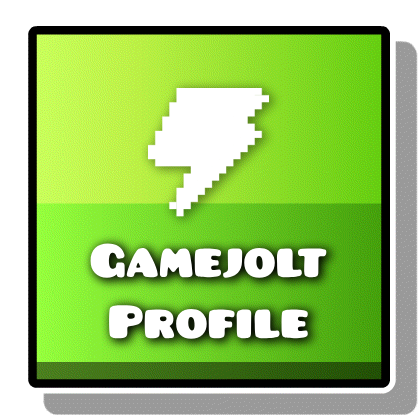
<style>
.page{position:relative;width:418px;height:416px;background:#ffffff}
.page>*{position:absolute;margin:0}
.t1{font:50.8px "Pusab";color:#ffffff}
</style>
<div class="page">
<p class="t1" style="left:90px;top:243px;width:237px;height:96px;text-align:center">Gamejolt<br>Profile</p>
</div>
